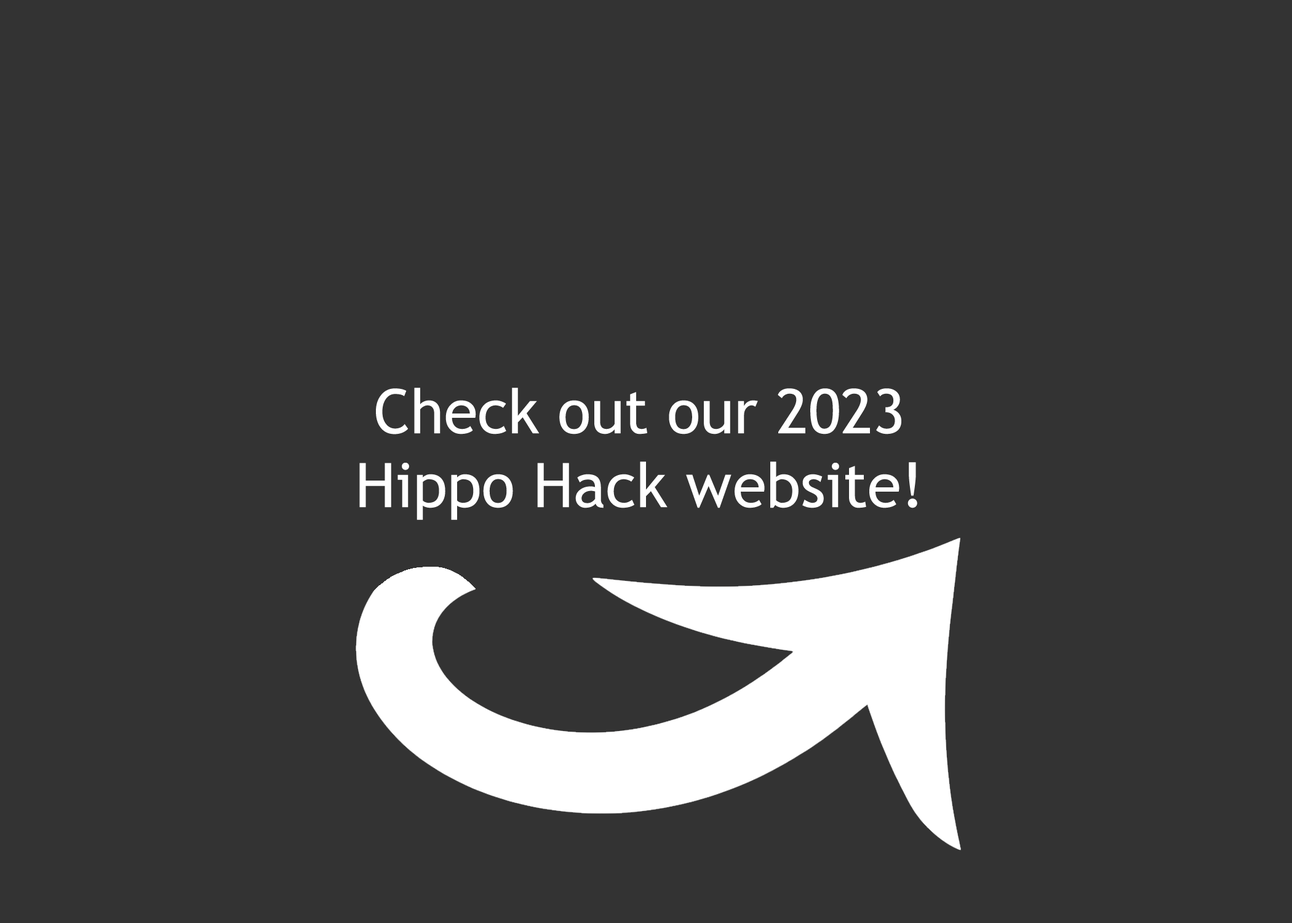
<style>
.page{position:relative;width:1292px;height:923px;background:#333333}
.page>*{position:absolute;margin:0}
.t1{font:61.5px "TrebuchetMS";color:#ffffff}
</style>
<div class="page">
<p class="t1" style="left:359px;top:388px;width:558px;height:132px;text-align:center">Check out our 2023<br>Hippo Hack website!</p>
</div>
